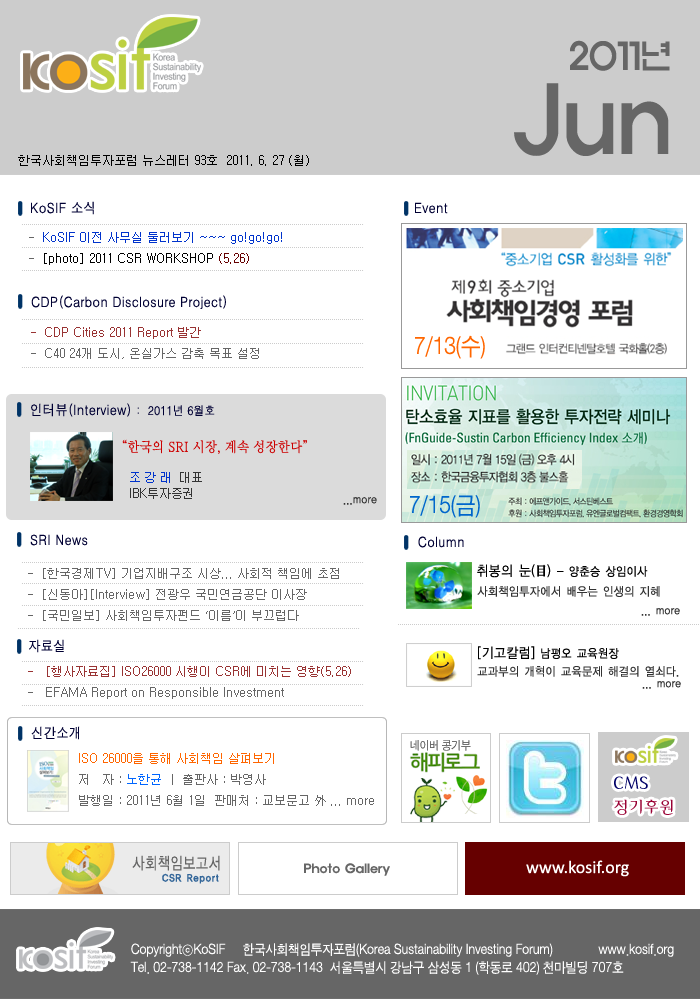
<style>
.page{position:relative;width:700px;height:1003px;background:#ffffff}
.page>*{position:absolute;margin:0}
.t1{font:36.1px/41.9px "ExpoM-HM";color:#666666;scale:0.89 1}
.t2{font:90.2px/41.9px "ExpoM-HM";color:#666666;scale:0.89 1}
.t3{font:12px "Gulim";color:#000000}
.t4{font:14px "H2gtrM";color:#000033;scale:0.9 1}
.t5{font:12px "Gulim";color:#0033cc}
.t6{font:12px "Gulim";color:#666666}
.t7{font:12px "Gulim";color:#660000}
.t8{font:12px "Gulim";color:#993333}
.t9{font:24px "SandJg";color:#ff6600;scale:0.9 1}
.t10{font:12px "H2gtrM";color:#000033;scale:0.9 1}
.t11{font:14px "Ymjo420";letter-spacing:-0.025em;color:#cc0000;scale:0.9 1}
.t12{font:12px/16px "Gulim";letter-spacing:-0.025em;color:#333333}
.t13{font:12px/16px "Gulim";letter-spacing:-0.025em;color:#0033cc}
.t14{font:12px "YDIYGO120-KSCpc-EUC-H";letter-spacing:-0.025em;color:#333333;scale:0.9 1}
.t15{font:24px "SandJg";color:#0066cc;scale:0.9 1}
.t16{font:12px "YDIYGO120-KSCpc-EUC-H";letter-spacing:-0.025em;color:#000000;scale:0.9 1}
.t17{font:14px "YDIYGO120-KSCpc-EUC-H";letter-spacing:-0.025em;color:#000000;scale:0.9 1}
.t18{font:14px "YDIYMjO150";letter-spacing:-0.025em;color:#000000;scale:0.9 1}
.t19{font:12px "Gulim";color:#ff6600}
.t20{font:12px "Gulim";color:#0066ff}
.t21{font:12px "ExpoM-HM";color:#666666}
.t22{font:18px "Calibri";color:#ffffff}
.t23{font:14px/18px "SandJg";color:#ffffff;scale:0.9 1}
</style>
<div class="page">
<p class="t1" style="left:514px;top:40px;width:156px;height:116px;text-align:right">2011년<br><span class="t2">Jun</span></p>
<p class="t3" style="left:18px;top:155px;width:291px;height:11px">한국사회책임투자포럼 뉴스레터 93호  2011. 6. 27 (월)</p>
<p class="t4" style="left:31px;top:201px;width:63px;height:14px">KoSIF 소식</p>
<p class="t4" style="left:415px;top:202px;width:33px;height:12px">Event</p>
<p class="t5" style="left:29px;top:232px;width:253px;height:33px"><span class="t6">-  </span>KoSIF 이전 사무실 둘러보기 ~~~ go!go!go! <br><span class="t6">-  </span><span class="t3">[photo] 2011 CSR WORKSHOP </span><span class="t7">(5.26)</span></p>
<p class="t4" style="left:31px;top:295px;width:195px;height:14px">CDP(Carbon Disclosure Project)</p>
<p class="t8" style="left:31px;top:327px;width:228px;height:32px">-  CDP Cities 2011 Report 발간<span class="t6"> <br>-  C40 24개 도시, 온실가스 감축 목표 설정</span></p>
<p class="t9" style="left:415px;top:335px;width:70px;height:24px">7/13(수)</p>
<p class="t4" style="left:31px;top:403px;width:184px;height:14px">인터뷰(Interview) <span class="t10">:  2011년 6월호</span></p>
<p class="t11" style="left:122px;top:439px;width:185px;height:15px">“한국의 SRI 시장, 계속 성장한다”</p>
<p class="t12" style="left:130px;top:472px;width:72px;height:27px"><span class="t13">조 강 래 </span> 대표 <br>IBK투자증권</p>
<p class="t14" style="left:343px;top:497px;width:34px;height:8px">...more</p>
<p class="t15" style="left:410px;top:495px;width:70px;height:23px">7/15(금)</p>
<p class="t4" style="left:30px;top:534px;width:58px;height:12px">SRI News</p>
<p class="t4" style="left:418px;top:536px;width:46px;height:12px">Column</p>
<p class="t6" style="left:28px;top:568px;width:311px;height:53px">-  [한국경제TV] 기업지배구조 시상... 사회적 책임에 초점<br>-  [신동아][Interview] 전광우 국민연금공단 이사장<br>-  [국민일보] 사회책임투자펀드 ‘이름’이 부끄럽다</p>
<p class="t16" style="left:477px;top:564px;width:171px;height:14px"><span class="t17">취봉의 눈(</span><span class="t18">目</span><span class="t17">) </span>- 양춘승 상임이사</p>
<p class="t14" style="left:477px;top:586px;width:183px;height:11px">사회책임투자에서 배우는 인생의 지혜</p>
<p class="t14" style="left:641px;top:608px;width:39px;height:8px">... more</p>
<p class="t4" style="left:29px;top:639px;width:35px;height:14px">자료실</p>
<p class="t16" style="left:478px;top:646px;width:141px;height:14px"><span class="t17">[기고칼럼]</span> 남평오 교육원장</p>
<p class="t8" style="left:28px;top:666px;width:323px;height:33px">-   [행사자료집] ISO26000 시행이 CSR에 미치는 영향(5.26) <br><span class="t6">-   EFAMA Report on Responsible Investment</span></p>
<p class="t14" style="left:477px;top:666px;width:202px;height:11px">교과부의 개혁이 교육문제 해결의 열쇠다.</p>
<p class="t14" style="left:642px;top:681px;width:39px;height:8px">... more</p>
<p class="t4" style="left:31px;top:726px;width:49px;height:14px">신간소개</p>
<p class="t6" style="left:79px;top:753px;width:295px;height:53px"><span class="t19">ISO 26000을 통해 사회책임 살펴보기<br></span>저   자 : <span class="t20">노한균</span> ㅣ 출판사 : 박영사  <br>발행일 : 2011년 6월 1일  판매처 : 교보문고 外 ... more</p>
<p class="t21" style="left:304px;top:863px;width:86px;height:13px">Photo Gallery</p>
<p class="t22" style="left:526px;top:860px;width:103px;height:17px">www.kosif.org</p>
<p class="t23" style="left:130px;top:943px;width:544px;height:32px">CopyrightⓒKoSIF     한국사회책임투자포럼(Korea Sustainability Investing Forum)             www.kosif.org <br>Tel. 02-738-1142 Fax. 02-738-1143  서울특별시 강남구 삼성동 1 (학동로 402) 천마빌딩 707호</p>
</div>
